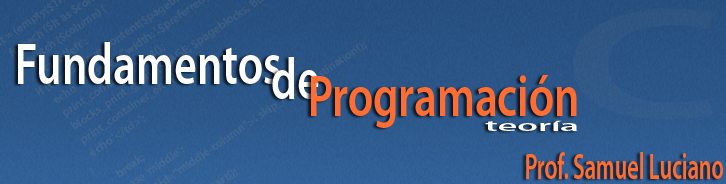
<style>
.page{position:relative;width:726px;height:184px}
.page>*{position:absolute;margin:0}
.t1{font:157.5px "MyriadPro-Semibold";color:#315886;scale:1.71 1}
.t2{font:58.6px "MyriadPro-Semibold";color:#ffffff;scale:0.76 1}
.t3{font:58.6px "MyriadPro-Semibold";color:#ff6d33;scale:0.76 1}
.t4{font:14.9px "MyriadPro-Semibold";color:#ffffff;scale:2.48 1}
.t5{font:37px "MyriadPro-Semibold";color:#ff6d33;scale:0.6 1}
</style>
<div class="page">
<p class="t1" style="left:573px;top:9px;width:142px;height:111px">C</p>
<p class="t2" style="left:18px;top:42px;width:262px;height:42px">Fundamentos</p>
<p class="t2" style="left:272px;top:57px;width:47px;height:42px">de</p>
<p class="t3" style="left:311px;top:75px;width:266px;height:53px">Programación</p>
<p class="t4" style="left:485px;top:120px;width:92px;height:11px">teoría</p>
<p class="t5" style="left:526px;top:152px;width:197px;height:27px">Prof. Samuel Luciano</p>
</div>
